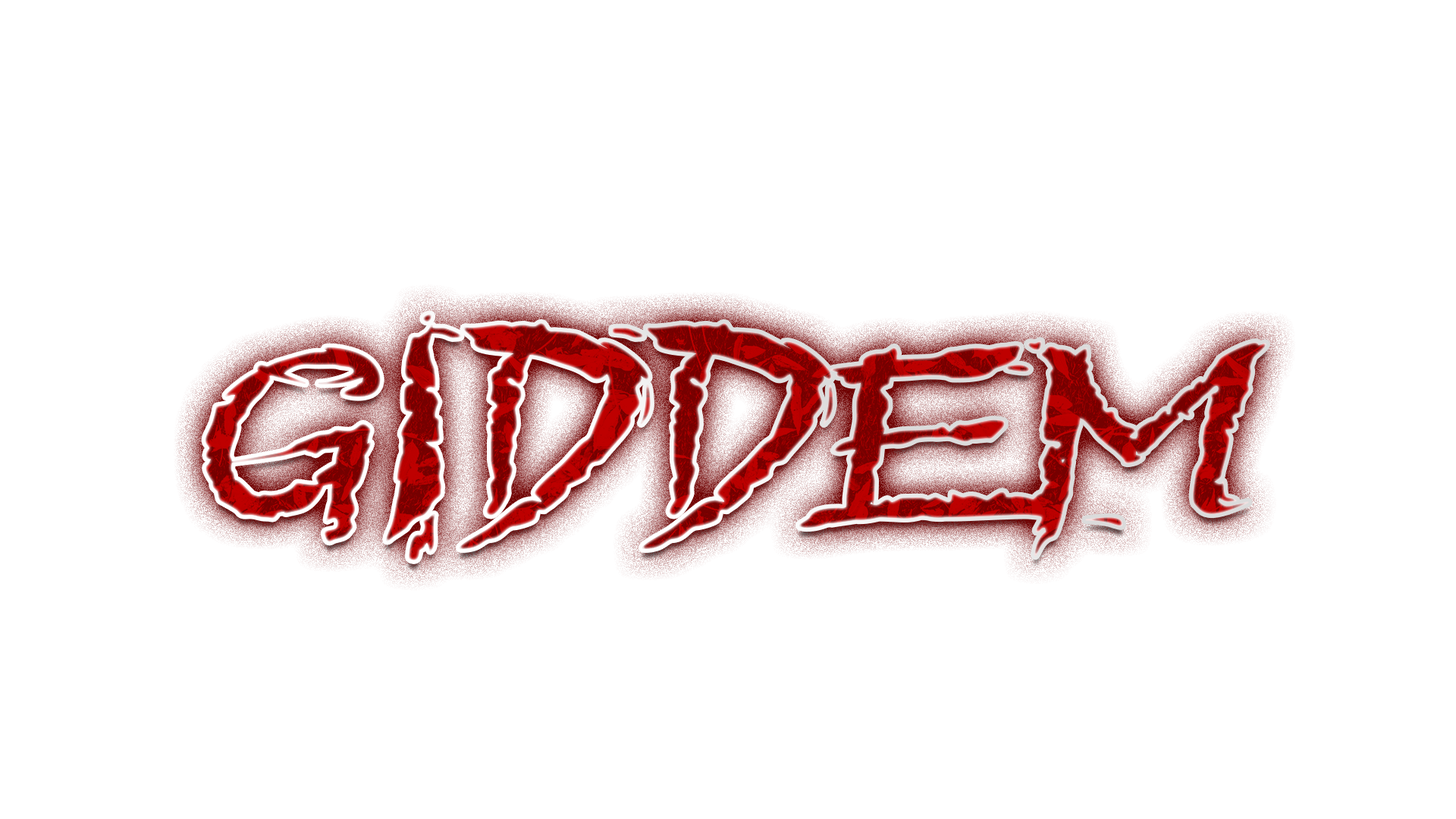
<style>
.page{position:relative;width:1456px;height:819px;background:#ffffff}
.page>*{position:absolute;margin:0}
.t1{font:341.2px "BMXRadical";text-transform:uppercase;font-weight:bold}
</style>
<div class="page">
<p class="t1" style="left:205px;top:314px;width:1062px;height:246px">GIDDEM</p>
</div>
